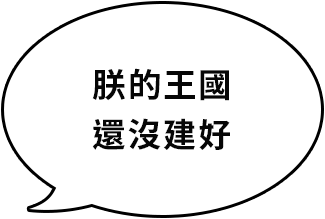
<style>
.page{position:relative;width:325px;height:219px;background:#ffffff}
.page>*{position:absolute;margin:0}
.t1{font:33.3px/50px "NotoSansCJKtc-Bold";letter-spacing:0.06em;color:#060606}
</style>
<div class="page">
<p class="t1" style="left:92px;top:68px;width:138px;height:82px;text-align:center">朕的王國<br>還沒建好</p>
</div>
